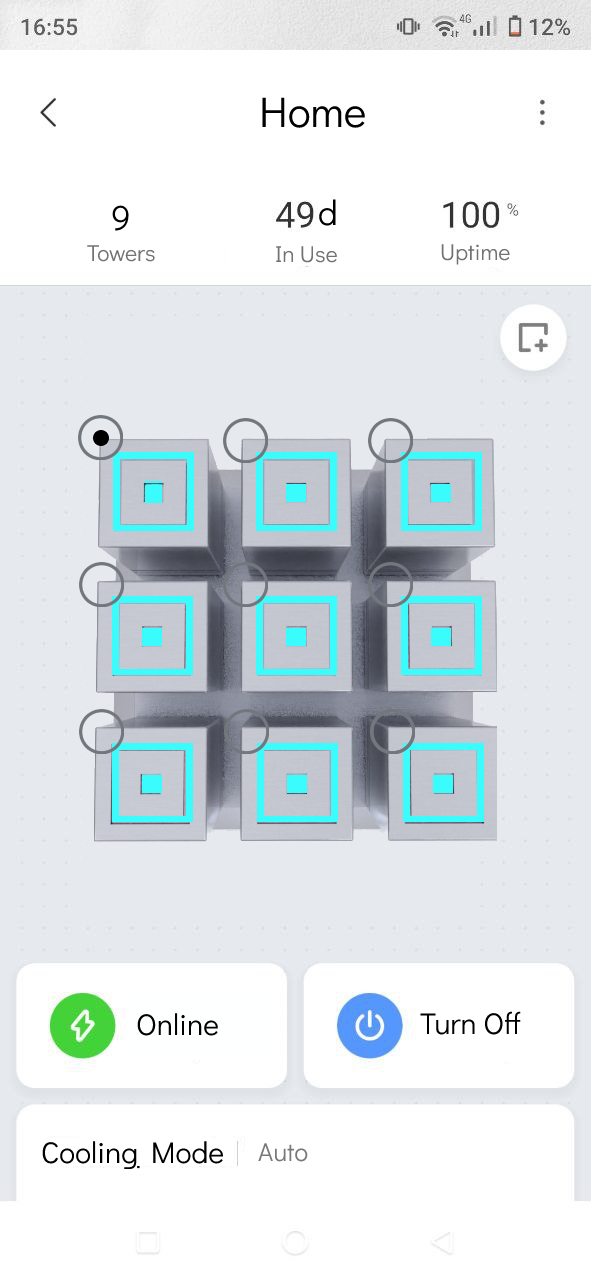
<style>
.page{position:relative;width:591px;height:1280px;background:#ffffff}
.page>*{position:absolute;margin:0}
.t1{font:43px "DidactGothic-Regular";color:#000000}
.t2{font:35px "DidactGothic-Regular";color:#000000}
.t3{font:23px "DidactGothic-Regular";color:#727272}
.t4{font:30px "DidactGothic-Regular";color:#000000}
.t5{font:26px "DidactGothic-Regular";color:#787878}
</style>
<div class="page">
<p class="t1" style="left:262px;top:97px;width:104px;height:31px">Home</p>
<p class="t2" style="left:112px;top:205px;width:17px;height:26px">9</p>
<p class="t2" style="left:319px;top:199px;width:17px;height:27px">d</p>
<p class="t3" style="left:87px;top:245px;width:68px;height:17px">Towers</p>
<p class="t3" style="left:276px;top:246px;width:62px;height:17px">In Use</p>
<p class="t3" style="left:441px;top:244px;width:69px;height:21px">Uptime</p>
<p class="t4" style="left:137px;top:1013px;width:82px;height:23px">Online</p>
<p class="t4" style="left:420px;top:1011px;width:101px;height:24px">Turn Off</p>
<p class="t4" style="left:42px;top:1141px;width:182px;height:28px">Cooling Mode</p>
<p class="t5" style="left:258px;top:1143px;width:50px;height:19px">Auto</p>
</div>
